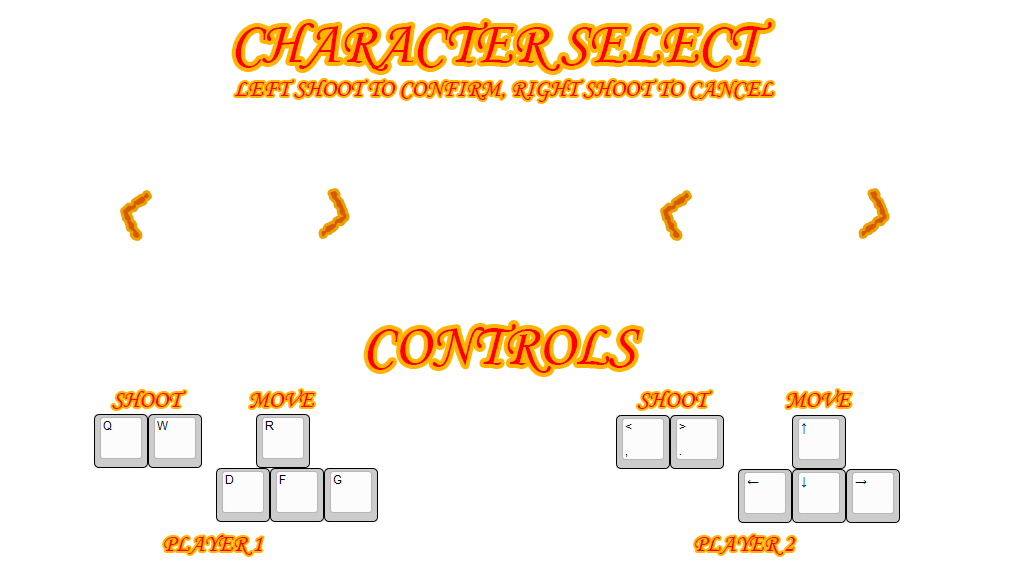
<style>
.page{position:relative;width:1024px;height:576px;background:#ffffff}
.page>*{position:absolute;margin:0}
.t1{font:60px "MonotypeCorsiva";color:#ff0000}
.t2{font:24px "MonotypeCorsiva";color:#ff0000}
.t3{font:125px "BlackadderITC-Regular";color:#d65b00}
</style>
<div class="page">
<p class="t1" style="left:235px;top:22px;width:537px;height:49px">CHARACTER SELECT</p>
<p class="t2" style="left:235px;top:80px;width:539px;height:22px">LEFT SHOOT TO CONFIRM, RIGHT SHOOT TO CANCEL</p>
<p class="t3" style="left:123px;top:191px;width:764px;height:47px">&lt;       &gt;            &lt;       &gt;</p>
<p class="t1" style="left:367px;top:324px;width:274px;height:49px">CONTROLS</p>
<p class="t2" style="left:112px;top:390px;width:203px;height:165px;text-align:center">SHOOT             MOVE<br><br><br><br><br>PLAYER 1</p>
<p class="t2" style="left:637px;top:390px;width:214px;height:165px;text-align:center">SHOOT               MOVE<br><br><br><br><br>PLAYER 2</p>
</div>
